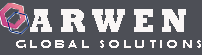
<style>
.page{position:relative;width:202px;height:55px;background:#4d4f56}
.page>*{position:absolute;margin:0}
.t1{font:34.1px "Rockwell-ExtraBold";letter-spacing:0.22em;color:#f9f6f6;scale:0.88 1}
.t2{font:12.4px "BerlinSansFBDemi-Bold";letter-spacing:0.22em;color:#fdf9f9;scale:1.22 1}
</style>
<div class="page">
<p class="t1" style="left:30px;top:9px;width:156px;height:23px">ARWEN</p>
<p class="t2" style="left:16px;top:40px;width:185px;height:8px">GLOBAL SOLUTIONS</p>
</div>
